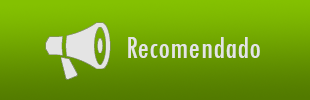
<style>
.page{position:relative;width:310px;height:100px}
.page>*{position:absolute;margin:0}
.t1{font:33px "TwCenMT-Condensed";color:#e4e4e4}
</style>
<div class="page">
<p class="t1" style="left:128px;top:37px;width:132px;height:21px">Recomendado</p>
</div>
